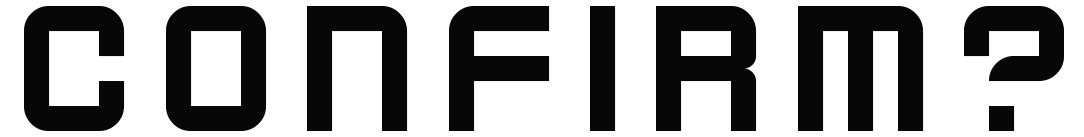
<style>
.page{position:relative;width:1084px;height:137px;background:#ffffff}
.page>*{position:absolute;margin:0}
.t1{font:200px "KenVector-Future-Thin";color:#080707}
</style>
<div class="page">
<p class="t1" style="left:24px;top:6px;width:1040px;height:125px">Confirm?</p>
</div>
